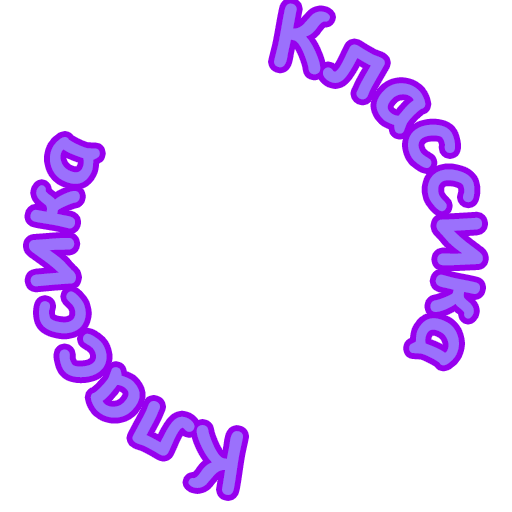
<style>
.page{position:relative;width:512px;height:512px;background:#ffffff}
.page>*{position:absolute;margin:0}
.t1{font:85px "ComicSansMS-Bold";color:#9b71fc}
</style>
<div class="page">
<p class="t1" style="left:29px;top:3px;width:454px;height:492px">Классика     Классика</p>
</div>
